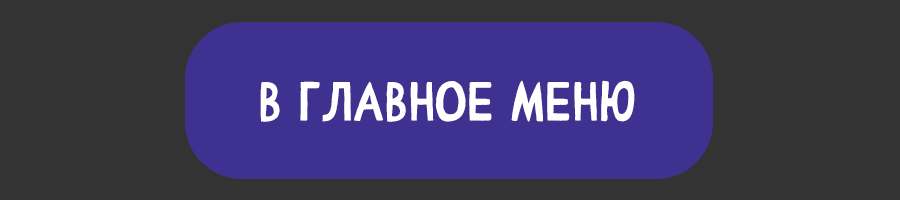
<style>
.page{position:relative;width:900px;height:200px;background:#333333}
.page>*{position:absolute;margin:0}
.t1{font:55px "ComicCAT";color:#ffffff}
</style>
<div class="page">
<p class="t1" style="left:260px;top:80px;width:375px;height:42px">в главное меню</p>
</div>
